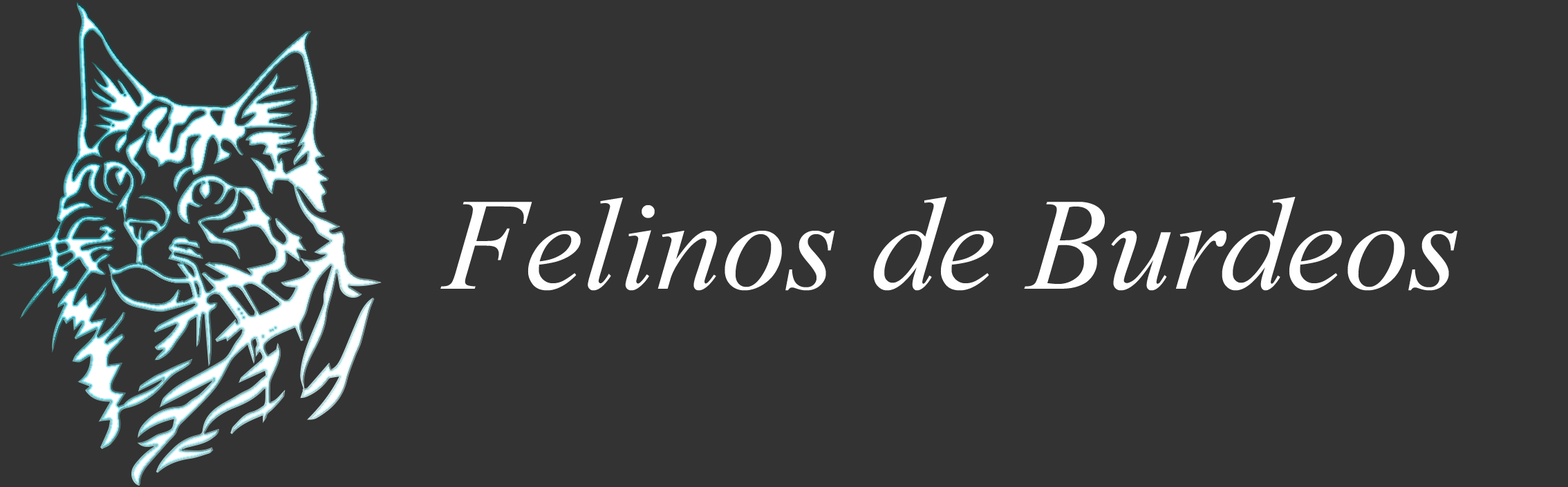
<style>
.page{position:relative;width:1568px;height:487px;background:#333333}
.page>*{position:absolute;margin:0}
.t1{font:131.4px "TimesNewRomanPS-ItalicMT";color:#ffffff}
</style>
<div class="page">
<p class="t1" style="left:440px;top:197px;width:1017px;height:94px">Felinos de Burdeos</p>
</div>
